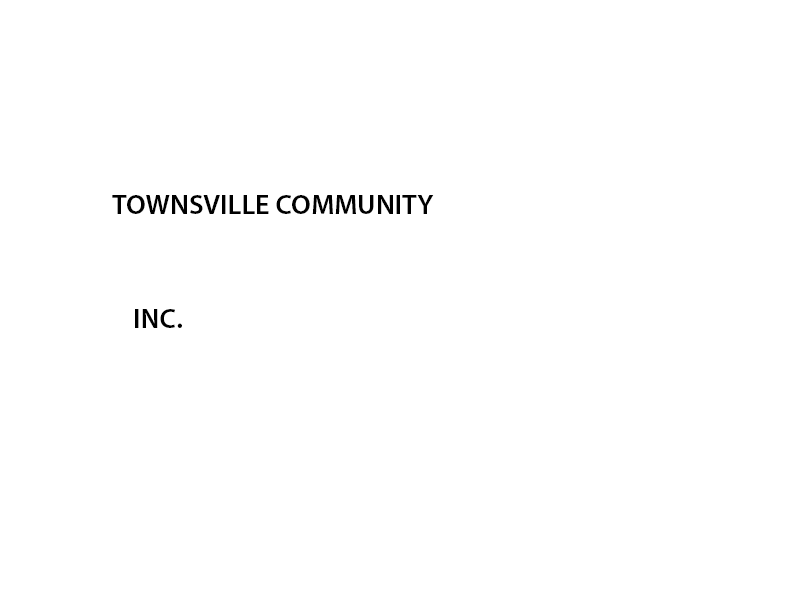
<style>
.page{position:relative;width:800px;height:600px;background:#ffffff}
.page>*{position:absolute;margin:0}
.t1{font:28px "MyriadPro-Semibold";color:#000000}
</style>
<div class="page">
<p class="t1" style="left:112px;top:195px;width:322px;height:19px">TOWNSVILLE COMMUNITY</p>
<p class="t1" style="left:135px;top:309px;width:47px;height:19px">INC.</p>
</div>
